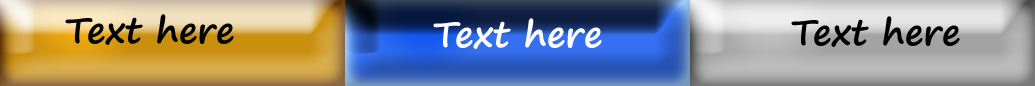
<style>
.page{position:relative;width:1035px;height:86px}
.page>*{position:absolute;margin:0}
.t1{font:35.9px "SegoePrint-Bold";color:#000000}
.t2{font:35.9px "SegoePrint-Bold";color:#ffffff}
</style>
<div class="page">
<p class="t1" style="left:65px;top:14px;width:169px;height:31px">Text here</p>
<p class="t1" style="left:791px;top:16px;width:169px;height:31px">Text here</p>
<p class="t2" style="left:433px;top:18px;width:169px;height:31px">Text here</p>
</div>
